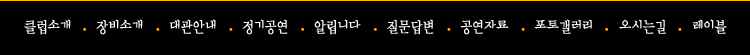
<style>
.page{position:relative;width:750px;height:55px;background:#000000}
.page>*{position:absolute;margin:0}
.t1{font:16px "ÈÆ¹Î¹ÙÅÁ¹ÝÃ¼";color:#ffffff;font-weight:bold;scale:0.8 1}
.t2{font:16px "HYRGoThic-Bold";color:#ffb400;font-weight:bold;scale:0.8 1}
</style>
<div class="page">
<p class="t1" style="left:24px;top:19px;width:703px;height:16px">클럽소개   <span class="t2">ㆍ   </span>장비소개   <span class="t2">ㆍ   </span>대관안내   <span class="t2">ㆍ   </span>정기공연   <span class="t2">ㆍ   </span>알립니다   <span class="t2">ㆍ   </span>질문답변   <span class="t2">ㆍ   </span>공연자료   <span class="t2">ㆍ   </span>포토갤러리   <span class="t2">ㆍ  </span> 오시는길   <span class="t2">ㆍ  </span> 레이블</p>
</div>
